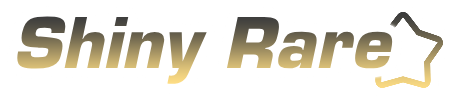
<style>
.page{position:relative;width:455px;height:100px;background:#ffffff}
.page>*{position:absolute;margin:0}
.t1{font:68px "Eurostile-BoldOblique"}
</style>
<div class="page">
<p class="t1" style="left:17px;top:16px;width:376px;height:68px">Shiny Rare</p>
</div>
